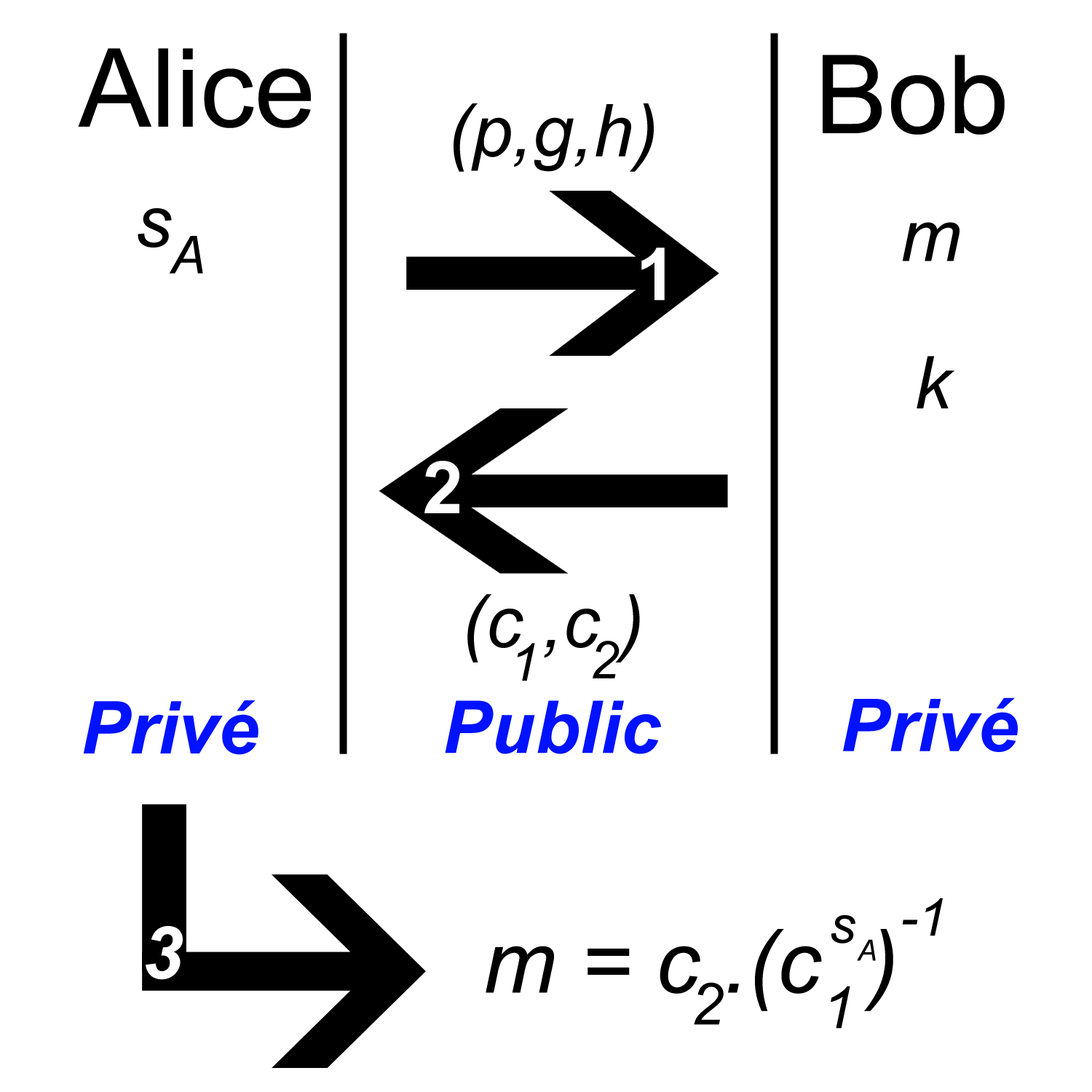
<style>
.page{position:relative;width:1092px;height:1092px;background:#ffffff}
.page>*{position:absolute;margin:0}
.t1{font:109.2px "ArialMT";color:#000000}
.t2{font:72.8px "Arial-ItalicMT";color:#000000}
.t3{font:52.4px "Arial-ItalicMT";color:#000000}
.t4{font:72.8px "Arial-BoldMT";color:#ffffff}
.t5{font:72.8px "Arial-BoldItalicMT";color:#0012ff}
.t6{font:72.8px "Arial-BoldItalicMT";color:#ffffff}
.t7{font:87.4px "Arial-ItalicMT";color:#000000}
.t8{font:29.1px "Arial-ItalicMT";color:#000000}
.t9{font:58.2px "Arial-ItalicMT";color:#000000}
</style>
<div class="page">
<p class="t1" style="left:78px;top:48px;width:233px;height:80px">Alice</p>
<p class="t1" style="left:823px;top:55px;width:182px;height:80px">Bob</p>
<p class="t2" style="left:454px;top:103px;width:200px;height:69px">(p,g,h)</p>
<p class="t2" style="left:138px;top:208px;width:34px;height:40px">s</p>
<p class="t2" style="left:902px;top:222px;width:57px;height:39px">m</p>
<p class="t3" style="left:169px;top:236px;width:34px;height:38px">A</p>
<p class="t4" style="left:641px;top:248px;width:24px;height:53px">1</p>
<p class="t2" style="left:917px;top:356px;width:37px;height:52px">k</p>
<p class="t4" style="left:424px;top:461px;width:35px;height:52px">2</p>
<p class="t2" style="left:467px;top:594px;width:173px;height:68px">(c ,c )</p>
<p class="t3" style="left:593px;top:641px;width:27px;height:37px">2</p>
<p class="t3" style="left:517px;top:643px;width:18px;height:38px">1</p>
<p class="t5" style="left:83px;top:700px;width:175px;height:55px">Privé</p>
<p class="t5" style="left:445px;top:700px;width:216px;height:54px">Public</p>
<p class="t5" style="left:843px;top:697px;width:175px;height:55px">Privé</p>
<p class="t3" style="left:902px;top:898px;width:41px;height:38px">-1</p>
<p class="t3" style="left:831px;top:915px;width:24px;height:28px">s</p>
<p class="t6" style="left:146px;top:926px;width:37px;height:54px">3</p>
<p class="t7" style="left:486px;top:929px;width:407px;height:82px">m = c .(c  )</p>
<p class="t8" style="left:857px;top:939px;width:19px;height:22px">A</p>
<p class="t9" style="left:694px;top:982px;width:30px;height:43px">2</p>
<p class="t9" style="left:831px;top:986px;width:19px;height:43px">1</p>
</div>
